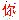
<style>
.page{position:relative;width:19px;height:20px;background:#fcfefc}
.page>*{position:absolute;margin:0}
.t1{font:14px "SimHei";color:#fd0101}
</style>
<div class="page">
<p class="t1" style="left:3px;top:4px;width:12px;height:12px">你</p>
</div>
